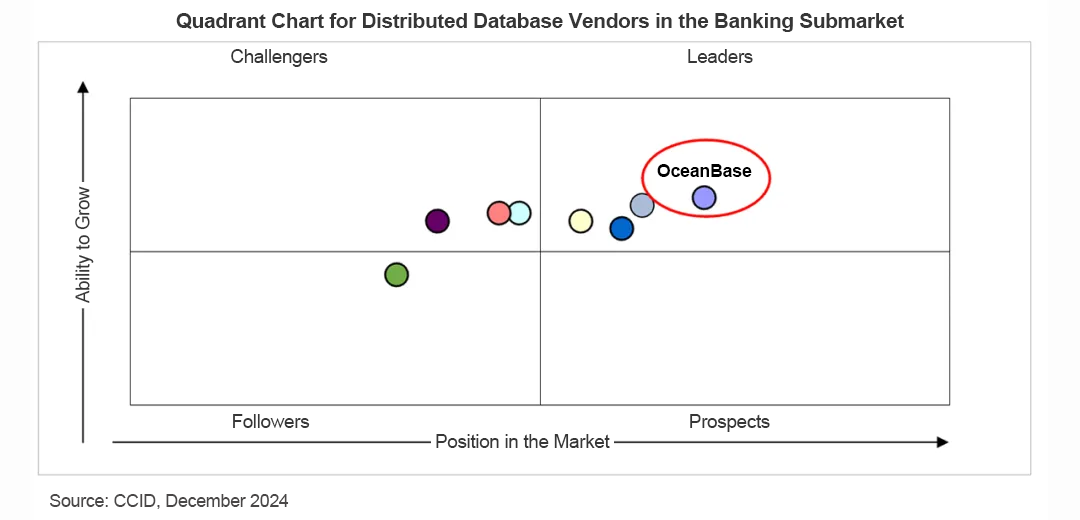
<style>
.page{position:relative;width:1080px;height:520px;background:#ffffff}
.page>*{position:absolute;margin:0}
.t1{font:21px "Arial-BoldMT";letter-spacing:-0.02em;color:#363636}
.t2{font:19px "ArialMT";letter-spacing:-0.02em;color:#363636}
.t3{font:18px "Arial-BoldMT";letter-spacing:-0.02em;color:#010101}
.t4{font:18px "ArialMT";letter-spacing:-0.02em;color:#494747}
</style>
<div class="page">
<p class="t1" style="left:176px;top:13px;width:728px;height:19px">Quadrant Chart for Distributed Database Vendors in the Banking Submarket</p>
<p class="t2" style="left:231px;top:49px;width:97px;height:18px">Challengers</p>
<p class="t2" style="left:688px;top:49px;width:65px;height:14px">Leaders</p>
<p class="t3" style="left:657px;top:164px;width:95px;height:13px">OceanBase</p>
<p class="t2" style="left:75px;top:186px;width:19px;height:117px;rotate:-90deg">Ability to Grow</p>
<p class="t2" style="left:233px;top:414px;width:77px;height:14px">Followers</p>
<p class="t2" style="left:690px;top:414px;width:80px;height:18px">Prospects</p>
<p class="t2" style="left:436px;top:434px;width:174px;height:14px">Position in the Market</p>
<p class="t4" style="left:50px;top:494px;width:239px;height:15px">Source: CCID, December 2024</p>
</div>
